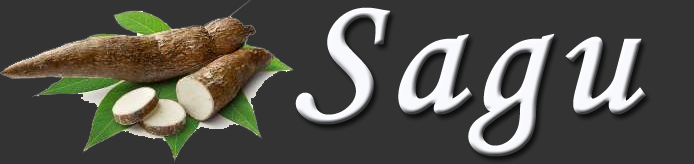
<style>
.page{position:relative;width:694px;height:164px;background:#333333}
.page>*{position:absolute;margin:0}
.t1{font:172px "MonotypeCorsiva";letter-spacing:0.05em;color:#f8f9fd;font-weight:bold}
</style>
<div class="page">
<p class="t1" style="left:295px;top:7px;width:351px;height:150px">Sagu</p>
</div>
